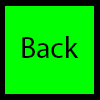
<style>
.page{position:relative;width:100px;height:100px;background:#00ff00}
.page>*{position:absolute;margin:0}
.t1{font:30px "MyriadPro-Regular";color:#000000}
</style>
<div class="page">
<p class="t1" style="left:22px;top:36px;width:57px;height:22px">Back</p>
</div>
